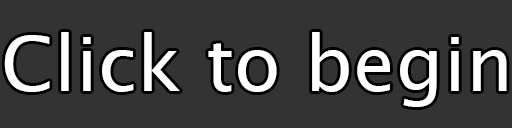
<style>
.page{position:relative;width:512px;height:128px;background:#333333}
.page>*{position:absolute;margin:0}
.t1{font:76.5px "LucidaSans";color:#ffffff}
</style>
<div class="page">
<p class="t1" style="left:4px;top:32px;width:503px;height:75px">Click to begin</p>
</div>
